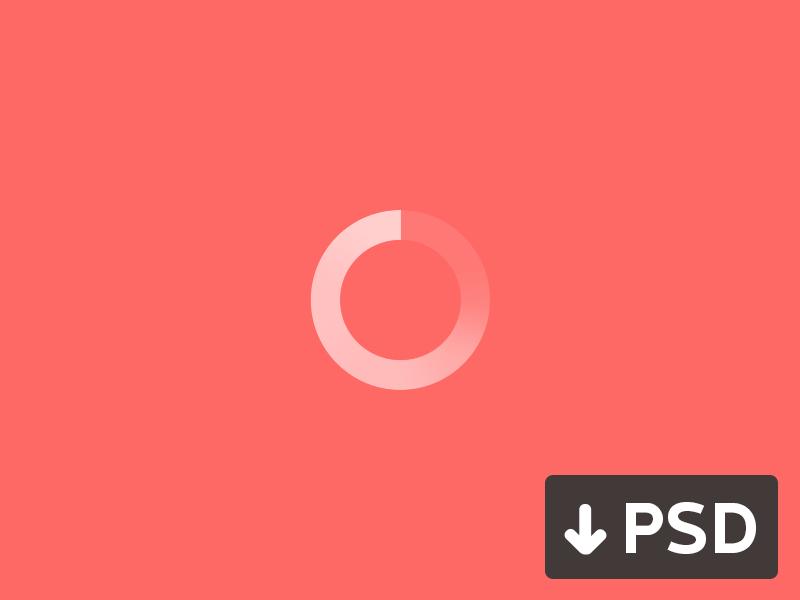
<style>
.page{position:relative;width:800px;height:600px;background:#fe6965}
.page>*{position:absolute;margin:0}
.t1{font:72px "CentraleSans-Bold";color:#ffffff}
</style>
<div class="page">
<p class="t1" style="left:626px;top:502px;width:130px;height:52px">PSD</p>
</div>
